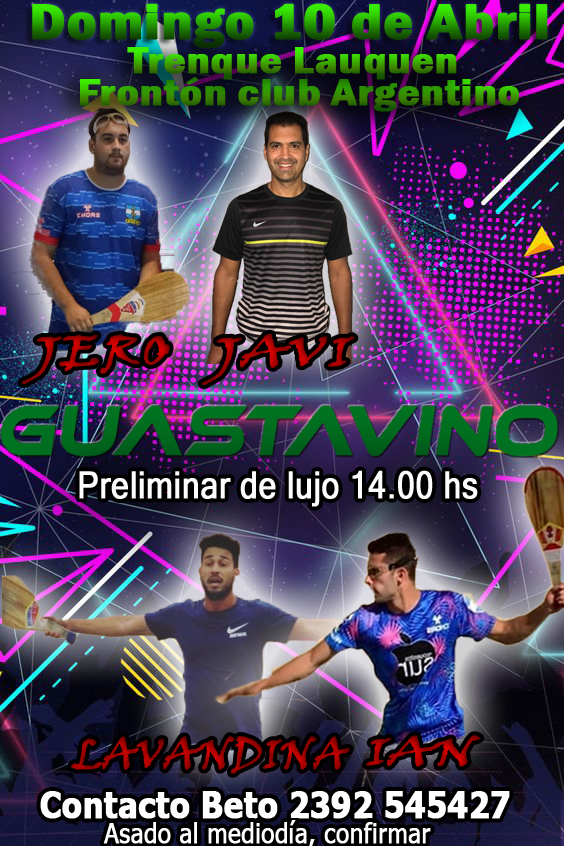
<style>
.page{position:relative;width:564px;height:846px}
.page>*{position:absolute;margin:0}
.t1{font:50.9px "FranklinGothic-DemiCond";font-weight:bold;scale:1.26 1}
.t2{font:38.1px "FranklinGothic-DemiCond";font-weight:bold;scale:1.26 1}
.t3{font:42.3px "VinerHandITC";font-weight:bold;scale:1.34 1}
.t4{font:37.4px "MicrosoftSansSerif";color:#fdfdfd;font-weight:bold;scale:0.85 1}
.t5{font:41.5px "VinerHandITC";font-weight:bold}
.t6{font:38.7px "VinerHandITC";font-weight:bold;scale:1.39 1}
.t7{font:37.1px "Tahoma-Bold";color:#ffffff;font-weight:bold;scale:0.86 1}
</style>
<div class="page">
<p class="t1" style="left:32px;top:3px;width:516px;height:46px">Domingo 10 de Abril</p>
<p class="t2" style="left:127px;top:47px;width:330px;height:33px">Trenque Lauquen</p>
<p class="t2" style="left:80px;top:77px;width:439px;height:35px">Frontón club Argentino</p>
<p class="t3" style="left:21px;top:334px;width:149px;height:50px">JERO</p>
<p class="t3" style="left:201px;top:333px;width:154px;height:52px">JAVI</p>
<p class="t4" style="left:79px;top:470px;width:399px;height:37px">Preliminar de lujo 14.00 hs</p>
<p class="t5" style="left:71px;top:736px;width:279px;height:38px">LAVANDINA</p>
<p class="t6" style="left:366px;top:735px;width:115px;height:32px">IAN</p>
<p class="t7" style="left:40px;top:791px;width:470px;height:28px">Contacto Beto 2392 545427</p>
</div>
